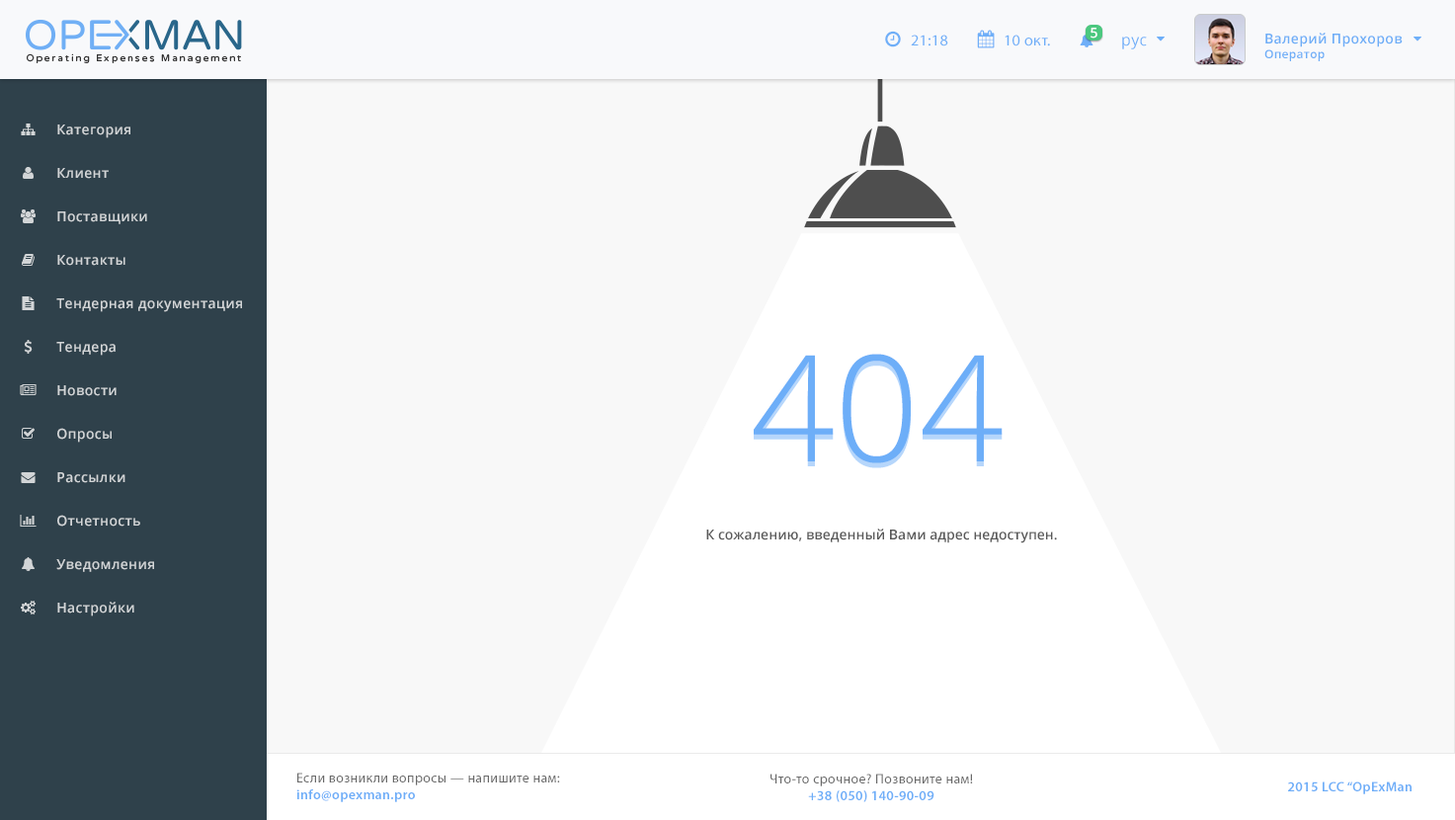
<style>
.page{position:relative;width:1455px;height:820px;background:#f8f8f8}
.page>*{position:absolute;margin:0}
.t1{font:13.8px "OpenSans-Semibold";letter-spacing:0.025em;color:#ffffff}
.t2{font:15.7px "MyriadPro-Regular";letter-spacing:0.025em;color:#6faff8}
.t3{font:15.7px "OpenSans";letter-spacing:0.025em;color:#6eaff8}
.t4{font:13.8px "OpenSans-Semibold";letter-spacing:0.025em;color:#6eaef7}
.t5{font:11.8px "OpenSans-Semibold";letter-spacing:0.025em;color:#6eaef7}
.t6{font:13.8px "OpenSans-Semibold";letter-spacing:0.025em;color:#d2d5d7}
.t7{font:147.6px "OpenSans-Light";color:#6daef8}
.t8{font:13.8px "OpenSans-Semibold";color:#595959}
.t9{font:13.8px "MyriadPro-Regular";letter-spacing:0.025em;color:#696969}
.t10{font:13.8px "MyriadPro-Semibold";letter-spacing:0.025em;color:#6eaef8}
</style>
<div class="page">
<p class="t1" style="left:1090px;top:28px;width:7px;height:11px">5</p>
<p class="t2" style="left:911px;top:35px;width:37px;height:11px">21:18</p>
<p class="t2" style="left:1004px;top:35px;width:46px;height:11px">10 окт.</p>
<p class="t3" style="left:1122px;top:37px;width:25px;height:12px">рус</p>
<p class="t4" style="left:1264px;top:33px;width:138px;height:28px">Валерий Прохоров<br><span class="t5">Оператор</span></p>
<p class="t6" style="left:57px;top:124px;width:73px;height:14px">Категория</p>
<p class="t6" style="left:57px;top:168px;width:52px;height:11px">Клиент</p>
<p class="t6" style="left:57px;top:211px;width:90px;height:13px">Поставщики</p>
<p class="t6" style="left:57px;top:255px;width:68px;height:11px">Контакты</p>
<p class="t6" style="left:56px;top:298px;width:186px;height:14px">Тендерная документация</p>
<p class="t6" style="left:56px;top:342px;width:60px;height:14px">Тендера</p>
<p class="t7" style="left:754px;top:354px;width:248px;height:109px">404</p>
<p class="t6" style="left:57px;top:385px;width:60px;height:11px">Новости</p>
<p class="t6" style="left:57px;top:428px;width:55px;height:14px">Опросы</p>
<p class="t6" style="left:57px;top:472px;width:68px;height:11px">Рассылки</p>
<p class="t6" style="left:57px;top:515px;width:83px;height:11px">Отчетность</p>
<p class="t8" style="left:706px;top:528px;width:351px;height:15px">К сожалению, введенный Вами адрес недоступен.</p>
<p class="t6" style="left:56px;top:559px;width:98px;height:13px">Уведомления</p>
<p class="t6" style="left:57px;top:601px;width:77px;height:15px">Настройки</p>
<p class="t9" style="left:296px;top:772px;width:264px;height:30px">Если возникли вопросы — напишите нам:<br><span class="t10">info@opexman.pro</span></p>
<p class="t9" style="left:770px;top:773px;width:203px;height:29px;text-align:center">Что-то срочное? Позвоните нам!<br><span class="t10">+38 (050) 140-90-09</span></p>
<p class="t10" style="left:1288px;top:781px;width:123px;height:13px">2015 LCC “OpExMan</p>
</div>
